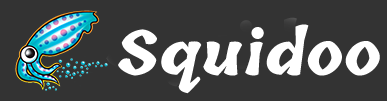
<style>
.page{position:relative;width:387px;height:101px;background:#333333}
.page>*{position:absolute;margin:0}
.t1{font:60px "Tillana-Bold";color:#ffffff;font-weight:bold}
</style>
<div class="page">
<p class="t1" style="left:118px;top:24px;width:262px;height:70px">Squidoo</p>
</div>
